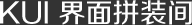
<style>
.page{position:relative;width:192px;height:25px;background:#333333}
.page>*{position:absolute;margin:0}
.t1{font:27.1px "FZZZHUNHJW--GB1-0";color:#fefefe}
</style>
<div class="page">
<p class="t1" style="left:0px;top:0px;width:192px;height:25px">KUI 界面拼装间</p>
</div>
